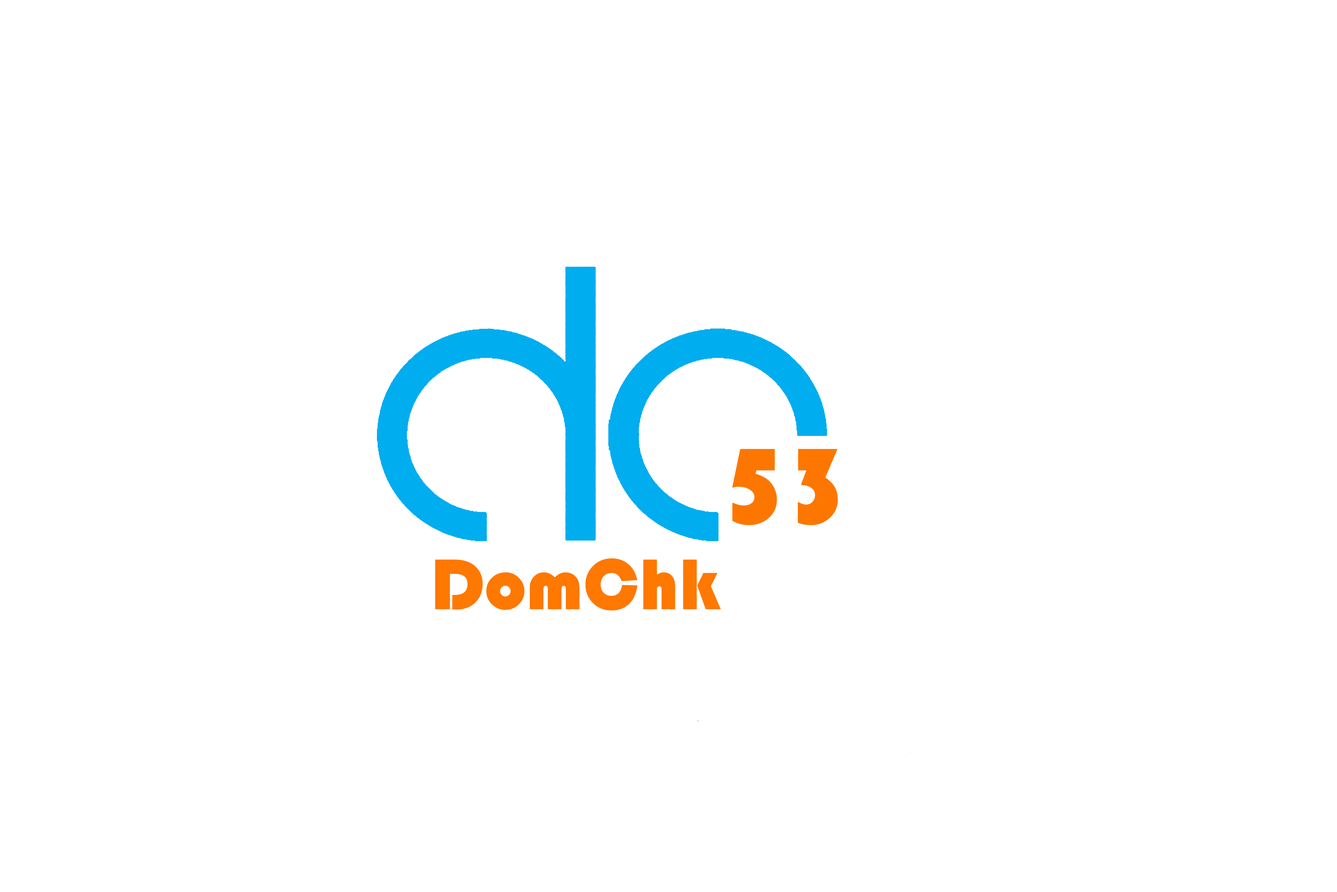
<style>
.page{position:relative;width:1337px;height:892px;background:#ffffff}
.page>*{position:absolute;margin:0}
.t1{font:111.5px "Bauhaus93";color:#fd7700}
.t2{font:74.3px "Bauhaus93";color:#ff7800}
</style>
<div class="page">
<p class="t1" style="left:732px;top:449px;width:106px;height:76px">53</p>
<p class="t2" style="left:435px;top:558px;width:286px;height:52px">DomChk</p>
</div>
